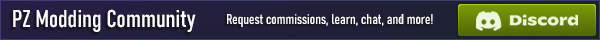
<style>
.page{position:relative;width:600px;height:40px}
.page>*{position:absolute;margin:0}
.t1{font:24px "Bahnschrift-Condensed";color:#ffffff;font-weight:bold}
.t2{font:14px "Bahnschrift-Condensed";color:#ffffff;font-weight:bold}
</style>
<div class="page">
<p class="t1" style="left:13px;top:9px;width:183px;height:23px">PZ Modding Community</p>
<p class="t2" style="left:227px;top:14px;width:206px;height:13px">Request commissions, learn, chat, and more!</p>
</div>
